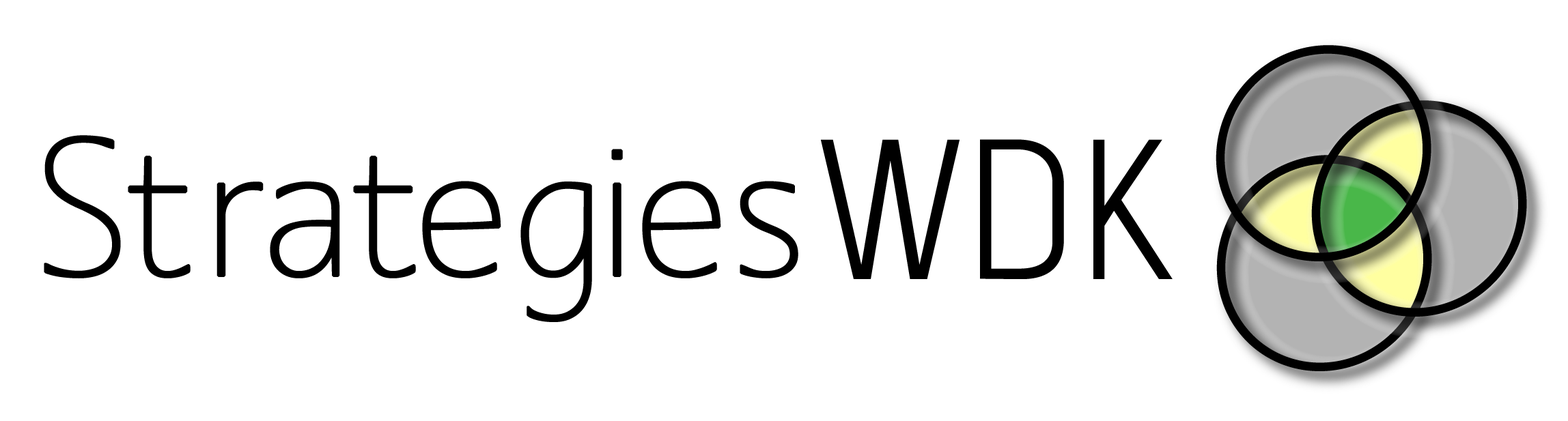
<style>
.page{position:relative;width:1568px;height:421px;background:#ffffff}
.page>*{position:absolute;margin:0}
.t1{font:199.2px "MankSans";color:#000000}
.t2{font:199.2px "advent-Regular";color:#000000}
</style>
<div class="page">
<p class="t1" style="left:44px;top:135px;width:754px;height:187px">Strategies</p>
<p class="t2" style="left:821px;top:139px;width:352px;height:140px">WDK</p>
</div>
